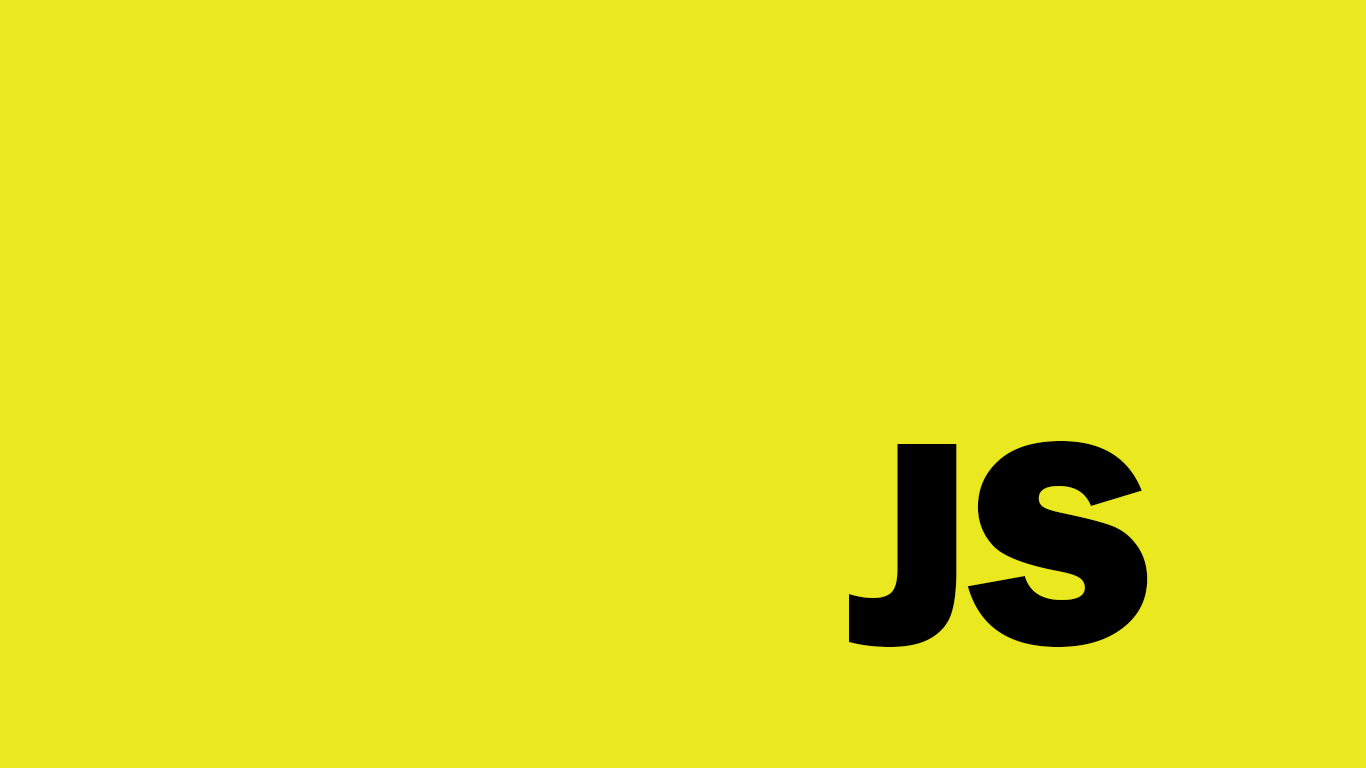
<style>
.page{position:relative;width:1366px;height:768px;background:#eae81f}
.page>*{position:absolute;margin:0}
.t1{font:300px "FranklinGothic-Heavy";color:#000000;text-transform:uppercase}
</style>
<div class="page">
<p class="t1" style="left:849px;top:441px;width:299px;height:206px">js</p>
</div>
